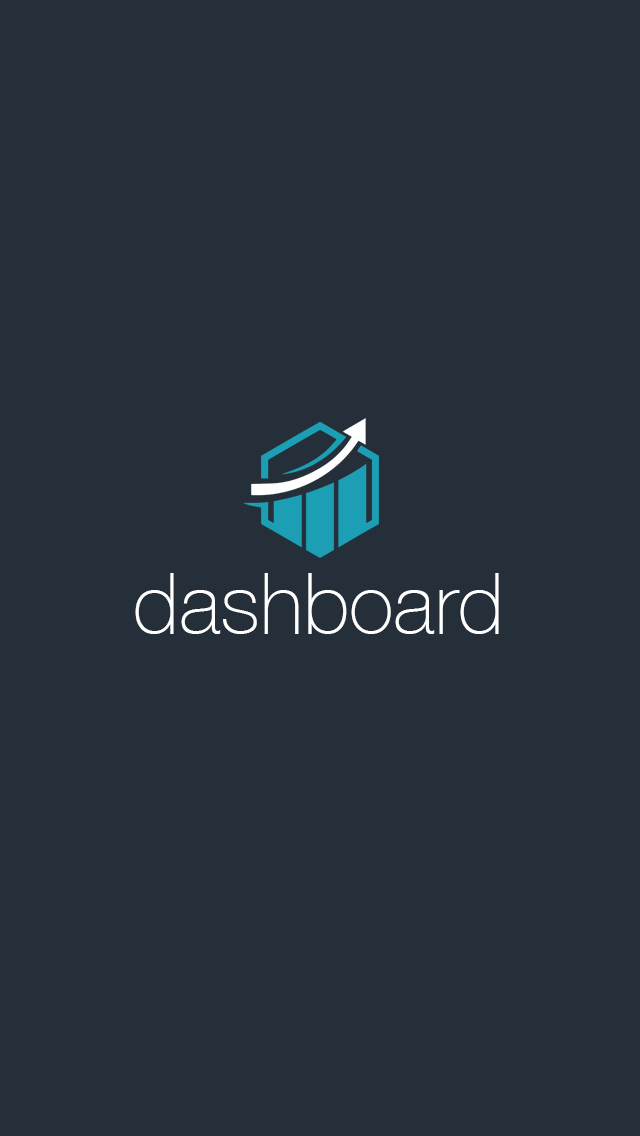
<style>
.page{position:relative;width:640px;height:1136px;background:#252f39}
.page>*{position:absolute;margin:0}
.t1{font:82.8px "HelveticaNeueThin";color:#ffffff}
</style>
<div class="page">
<p class="t1" style="left:135px;top:573px;width:364px;height:61px">dashboard</p>
</div>
